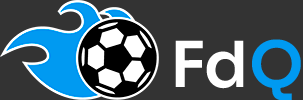
<style>
.page{position:relative;width:303px;height:100px;background:#333333}
.page>*{position:absolute;margin:0}
.t1{font:63.3px "Sora-SemiBold";color:#ffffff}
.t2{font:63.3px "Sora-SemiBold";color:#009af1}
</style>
<div class="page">
<p class="t1" style="left:175px;top:39px;width:126px;height:62px">Fd<span class="t2">Q</span></p>
</div>
